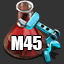
<style>
.page{position:relative;width:64px;height:64px;background:#333333}
.page>*{position:absolute;margin:0}
.t1{font:18px "Impact";color:#ffffff}
</style>
<div class="page">
<p class="t1" style="left:11px;top:36px;width:31px;height:14px">M45</p>
</div>
